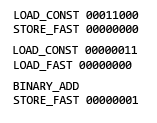
<style>
.page{position:relative;width:157px;height:123px;background:#ffffff}
.page>*{position:absolute;margin:0}
.t1{font:12px "Consolas";color:#000000}
</style>
<div class="page">
<p class="t1" style="left:13px;top:11px;width:126px;height:24px;text-align:center">LOAD_CONST 00011000<br>STORE_FAST 00000000</p>
<p class="t1" style="left:13px;top:46px;width:124px;height:10px">LOAD_CONST 00000011</p>
<p class="t1" style="left:14px;top:61px;width:118px;height:10px">LOAD_FAST 00000000</p>
<p class="t1" style="left:13px;top:82px;width:66px;height:10px">BINARY_ADD</p>
<p class="t1" style="left:13px;top:96px;width:125px;height:10px">STORE_FAST 00000001</p>
</div>
